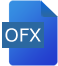
<style>
.page{position:relative;width:58px;height:66px;background:#2b68a0}
.page>*{position:absolute;margin:0}
.t1{font:18px "Verdana";color:#ffffff}
</style>
<div class="page">
<p class="t1" style="left:5px;top:28px;width:36px;height:14px">OFX</p>
</div>
